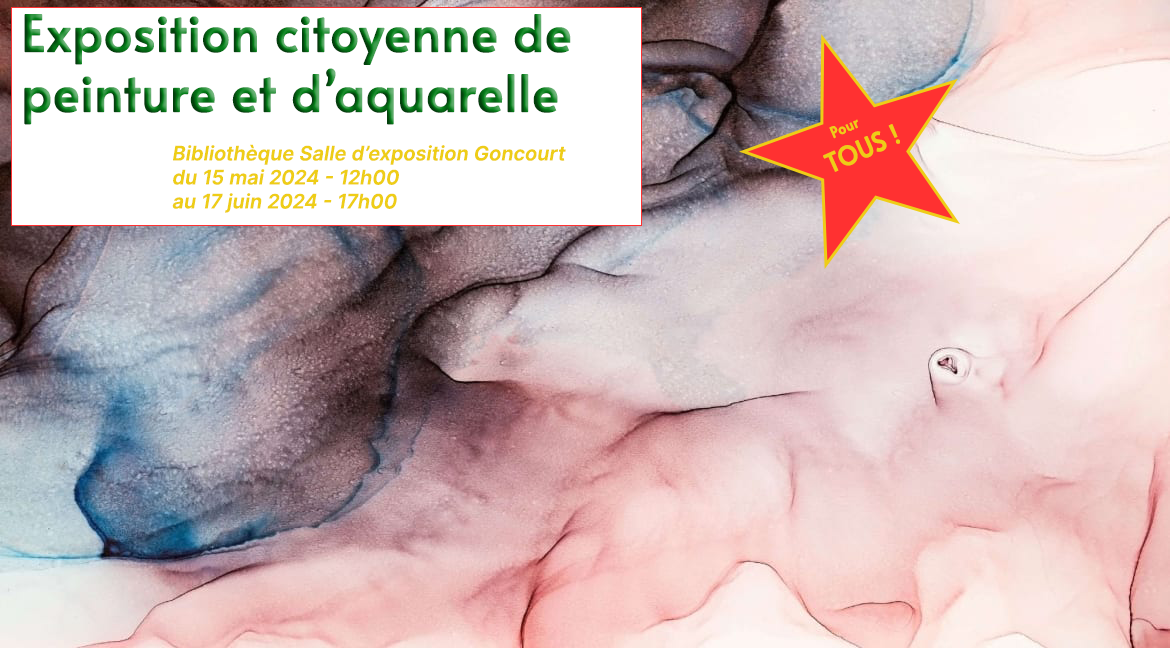
<style>
.page{position:relative;width:1170px;height:648px}
.page>*{position:absolute;margin:0}
.t1{font:50px "Alata-Regular";letter-spacing:0.005em;font-weight:bold}
.t2{font:25.9px "Alata-Regular";letter-spacing:0.005em;color:#eecd17;font-weight:bold;scale:0.94 1}
.t3{font:15px "Alata-Regular";letter-spacing:0.005em;color:#eecd17;font-weight:bold;scale:0.94 1}
.t4{font:20px "Inter-SemiBoldItalic";letter-spacing:0.005em;color:#eecd17;font-weight:bold}
</style>
<div class="page">
<p class="t1" style="left:24px;top:14px;width:547px;height:111px">Exposition citoyenne de <br>peinture et d’aquarelle</p>
<p class="t2" style="left:823px;top:119px;width:77px;height:53px;text-align:center;rotate:-24deg"><span class="t3">Pour<br></span>TOUS !</p>
<p class="t4" style="left:172px;top:144px;width:394px;height:69px">Bibliothèque Salle d’exposition Goncourt<br>du 15 mai 2024 - 12h00<br>au 17 juin 2024 - 17h00</p>
</div>
